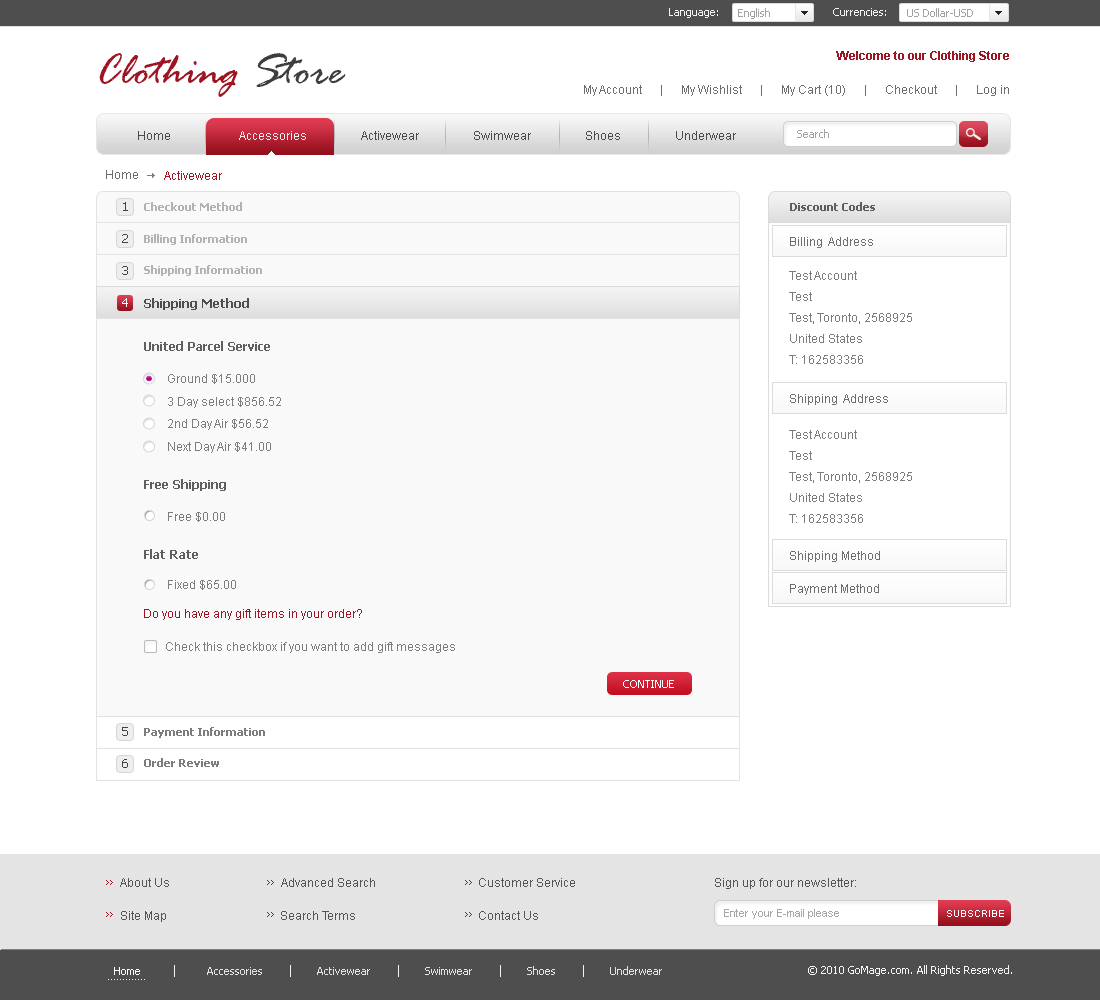
<style>
.page{position:relative;width:1100px;height:1000px;background:#ffffff}
.page>*{position:absolute;margin:0}
.t1{font:11px "Tahoma";color:#f4f4f4}
.t2{font:11px "Tahoma";color:#a2a2a2}
.t3{font:47px "RageItalic";color:#9d1523}
.t4{font:47px "RageItalic";color:#3e3e3e}
.t5{font:12px "Arial-BoldMT";color:#9d1523}
.t6{font:12px "ArialMT";color:#6d6d6d}
.t7{font:12px "ArialMT";color:#4a4a4a}
.t8{font:12px "ArialMT";color:#f1f1f1}
.t9{font:12px "ArialMT";color:#9d1523}
.t10{font:12px "Tahoma";color:#434343}
.t11{font:11px "Tahoma-Bold";color:#b2b2b2}
.t12{font:11px "Tahoma-Bold";color:#5e5d5d}
.t13{font:12px/21px "ArialMT";color:#7c7c7c}
.t14{font:12px "Tahoma";color:#ffffff}
.t15{font:12px "Tahoma-Bold";color:#4e4e4e}
.t16{font:12px "Tahoma-Bold";color:#5f5f5f}
.t17{font:12px "ArialMT";color:#7c7c7c}
.t18{font:11px "Tahoma";color:#ffffff;text-transform:uppercase}
.t19{font:11px "Tahoma-Bold";color:#7c7c7c}
.t20{font:12px "ArialMT";color:#565656}
.t21{font:12px "ArialMT";color:#555555}
.t22{font:11px "ArialMT";color:#a6a6a6}
.t23{font:10px "ArialMT";color:#ffffff;text-transform:uppercase}
.t24{font:11px "Tahoma";color:#e3e3e3}
.t25{font:11px "Tahoma";color:#ffffff}
.t26{font:11px "ArialMT";color:#f2f2f2}
</style>
<div class="page">
<p class="t1" style="left:669px;top:8px;width:49px;height:10px">Language:</p>
<p class="t2" style="left:738px;top:8px;width:32px;height:11px">English</p>
<p class="t1" style="left:833px;top:8px;width:53px;height:8px">Currencies:</p>
<p class="t2" style="left:907px;top:8px;width:66px;height:9px">US Dollar-USD</p>
<p class="t3" style="left:99px;top:53px;width:247px;height:44px">Clothing <span class="t4">Store</span></p>
<p class="t5" style="left:836px;top:51px;width:173px;height:11px">Welcome to our Clothing Store</p>
<p class="t6" style="left:584px;top:85px;width:425px;height:11px">My Account      |      My Wishlist      |      My Cart (10)      |      Checkout      |      Log in</p>
<p class="t7" style="left:138px;top:131px;width:598px;height:9px">Home                     <span class="t8">  Accessories  </span>                Activewear                  Swimwear                  Shoes                  Underwear</p>
<p class="t2" style="left:797px;top:129px;width:32px;height:9px">Search</p>
<p class="t6" style="left:106px;top:170px;width:32px;height:9px">Home</p>
<p class="t9" style="left:164px;top:171px;width:58px;height:9px">Activewear</p>
<p class="t10" style="left:123px;top:202px;width:5px;height:9px">1</p>
<p class="t11" style="left:144px;top:202px;width:98px;height:9px">Checkout Method</p>
<p class="t12" style="left:790px;top:202px;width:85px;height:9px">Discount Codes</p>
<p class="t10" style="left:122px;top:234px;width:6px;height:9px">2</p>
<p class="t11" style="left:144px;top:234px;width:103px;height:11px">Billing Information</p>
<p class="t6" style="left:790px;top:237px;width:83px;height:11px">Billing  Address</p>
<p class="t10" style="left:122px;top:266px;width:6px;height:9px">3</p>
<p class="t11" style="left:144px;top:265px;width:118px;height:11px">Shipping Information</p>
<p class="t13" style="left:789px;top:271px;width:123px;height:93px">Test Account<br>Test<br>Test, Toronto, 2568925<br>United States<br>T: 162583356</p>
<p class="t14" style="left:122px;top:298px;width:6px;height:9px">4</p>
<p class="t15" style="left:144px;top:298px;width:105px;height:12px">Shipping Method</p>
<p class="t16" style="left:144px;top:341px;width:126px;height:10px">United Parcel Service</p>
<p class="t17" style="left:168px;top:374px;width:87px;height:10px">Ground $15.000</p>
<p class="t17" style="left:168px;top:397px;width:113px;height:11px">3 Day select $856.52</p>
<p class="t6" style="left:790px;top:394px;width:98px;height:11px">Shipping  Address</p>
<p class="t17" style="left:168px;top:419px;width:100px;height:11px">2nd Day Air $56.52</p>
<p class="t13" style="left:789px;top:430px;width:123px;height:93px">Test Account<br>Test<br>Test, Toronto, 2568925<br>United States<br>T: 162583356</p>
<p class="t17" style="left:168px;top:442px;width:103px;height:11px">Next Day Air $41.00</p>
<p class="t16" style="left:144px;top:479px;width:82px;height:12px">Free Shipping</p>
<p class="t17" style="left:168px;top:512px;width:57px;height:10px">Free $0.00</p>
<p class="t16" style="left:144px;top:549px;width:54px;height:10px">Flat Rate</p>
<p class="t6" style="left:790px;top:551px;width:90px;height:11px">Shipping Method</p>
<p class="t17" style="left:168px;top:580px;width:68px;height:10px">Fixed $65.00</p>
<p class="t6" style="left:790px;top:584px;width:89px;height:11px">Payment Method</p>
<p class="t9" style="left:144px;top:609px;width:218px;height:11px">Do you have any gift items in your order?</p>
<p class="t17" style="left:166px;top:642px;width:289px;height:11px">Check this checkbox if you want to add gift messages</p>
<p class="t18" style="left:623px;top:680px;width:51px;height:8px">Continue</p>
<p class="t10" style="left:122px;top:727px;width:6px;height:9px">5</p>
<p class="t19" style="left:144px;top:727px;width:121px;height:11px">Payment Information</p>
<p class="t10" style="left:122px;top:759px;width:6px;height:9px">6</p>
<p class="t19" style="left:144px;top:758px;width:75px;height:9px">Order Review</p>
<p class="t20" style="left:120px;top:878px;width:49px;height:9px">About Us</p>
<p class="t21" style="left:281px;top:878px;width:94px;height:9px">Advanced Search</p>
<p class="t21" style="left:479px;top:878px;width:96px;height:9px">Customer Service</p>
<p class="t21" style="left:715px;top:878px;width:141px;height:11px">Sign up for our newsletter:</p>
<p class="t21" style="left:121px;top:911px;width:45px;height:11px">Site Map</p>
<p class="t21" style="left:281px;top:911px;width:74px;height:9px">Search Terms</p>
<p class="t21" style="left:479px;top:911px;width:59px;height:9px">Contact Us</p>
<p class="t22" style="left:724px;top:909px;width:115px;height:10px">Enter your E-mail please</p>
<p class="t23" style="left:947px;top:910px;width:57px;height:7px">Subscribe</p>
<p class="t24" style="left:114px;top:966px;width:548px;height:9px"><span class="t25">Home </span>                     Accessories                  Activewear                  Swimwear                  Shoes                  Underwear</p>
<p class="t1" style="left:808px;top:965px;width:204px;height:11px">© 2010 GoMage.com. All Rights Reserved.</p>
<p class="t26" style="left:108px;top:979px;width:37px;height:1px">.............</p>
</div>
